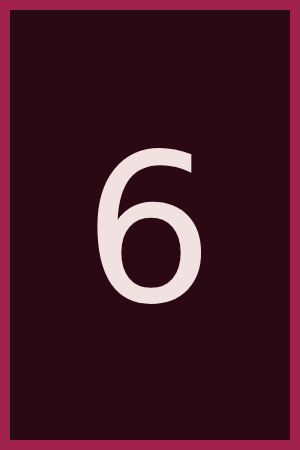
<style>
.page{position:relative;width:300px;height:450px;background:#2a0914}
.page>*{position:absolute;margin:0}
.t1{font:206px "DejaVuSans";color:#f2e1e1}
</style>
<div class="page">
<p class="t1" style="left:97px;top:148px;width:105px;height:156px">6</p>
</div>
